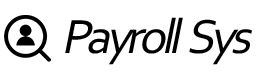
<style>
.page{position:relative;width:280px;height:71px;background:#ffffff}
.page>*{position:absolute;margin:0}
.t1{font:50px "Corbel";letter-spacing:-0.09em;color:#000000;font-style:italic}
</style>
<div class="page">
<p class="t1" style="left:65px;top:17px;width:187px;height:48px">Payroll  Sys</p>
</div>
